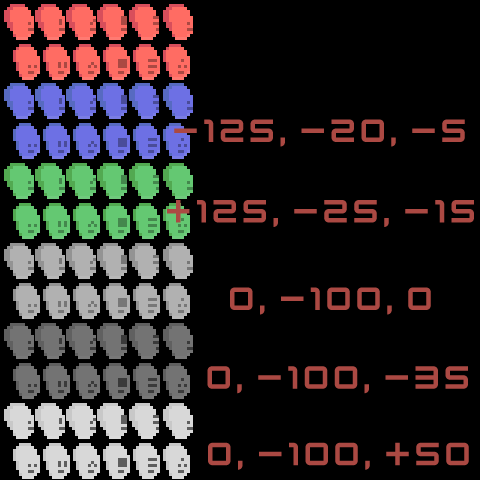
<style>
.page{position:relative;width:480px;height:480px;background:#000000}
.page>*{position:absolute;margin:0}
.t1{font:36px "KenVector-Future";color:#ab4943}
</style>
<div class="page">
<p class="t1" style="left:174px;top:119px;width:291px;height:28px">-125, -20, -5</p>
<p class="t1" style="left:167px;top:200px;width:307px;height:27px">+125, -25, -15</p>
<p class="t1" style="left:230px;top:287px;width:201px;height:28px">0, -100, 0</p>
<p class="t1" style="left:207px;top:366px;width:261px;height:28px">0, -100, -35</p>
<p class="t1" style="left:208px;top:442px;width:261px;height:28px">0, -100, +50</p>
</div>
